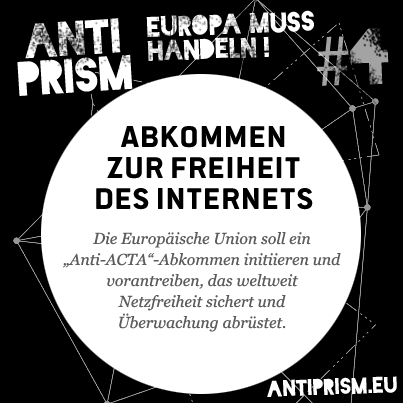
<style>
.page{position:relative;width:403px;height:403px;background:#ffffff}
.page>*{position:absolute;margin:0}
.t1{font:26.8px/23.9px "Blackout-Midnight";color:#ffffff}
.t2{font:45.7px/37.2px "Blackout-Midnight";color:#ffffff}
.t3{font:74.8px "MyriadPro-Regular"}
.t4{font:74.8px "Blackout-Midnight"}
.t5{font:33px/31px "PoliticsHead-Bold";color:#000000}
.t6{font:15.8px/21px "Georgia-Italic";color:#5c5c5c}
.t7{font:21.6px "Blackout-Midnight";color:#ffffff}
</style>
<div class="page">
<p class="t1" style="left:146px;top:10px;width:168px;height:51px;rotate:-2deg">EUROPA MUSS<br>HANDELN !</p>
<p class="t2" style="left:17px;top:18px;width:116px;height:78px;text-align:center;rotate:-4deg">ANTI<br>PRISM</p>
<p class="t3" style="left:317px;top:28px;width:72px;height:58px;rotate:-2deg">#<span class="t4">4</span></p>
<p class="t5" style="left:96px;top:126px;width:217px;height:84px;text-align:center">Abkommen<br>zur Freiheit<br>des Internets</p>
<p class="t6" style="left:63px;top:232px;width:278px;height:100px;text-align:center">Die Europäische Union soll ein „Anti-ACTA“-Abkommen initiieren und vorantreiben, das weltweit<br>Netzfreiheit sichert und<br>Überwachung abrüstet.</p>
<p class="t7" style="left:267px;top:376px;width:130px;height:21px;rotate:-2deg">antiprism.eu</p>
</div>
